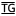
<style>
.page{position:relative;width:16px;height:16px;background:#ffffff}
.page>*{position:absolute;margin:0}
.t1{font:11.1px "NotoSans";color:#000000}
</style>
<div class="page">
<p class="t1" style="left:1px;top:3px;width:14px;height:10px">TG</p>
</div>
